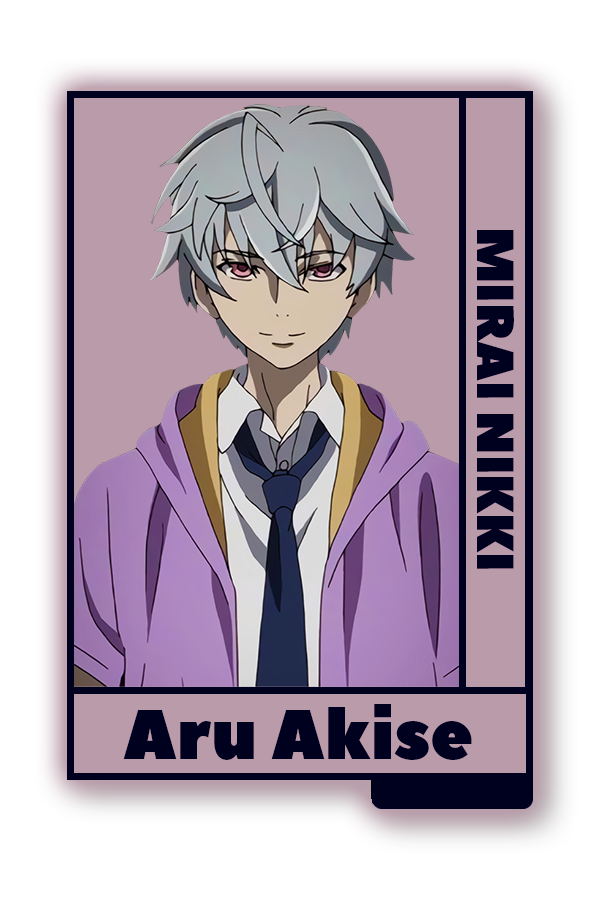
<style>
.page{position:relative;width:600px;height:900px;background:#ba9ba9}
.page>*{position:absolute;margin:0}
.t1{font:52px "PeaceSans";color:#00001b}
.t2{font:70.1px "PeaceSans";color:#00001b}
</style>
<div class="page">
<p class="t1" style="left:477px;top:230px;width:37px;height:339px;rotate:90deg">MIRAI NIKKI</p>
<p class="t2" style="left:123px;top:704px;width:349px;height:56px">Aru Akise</p>
</div>
